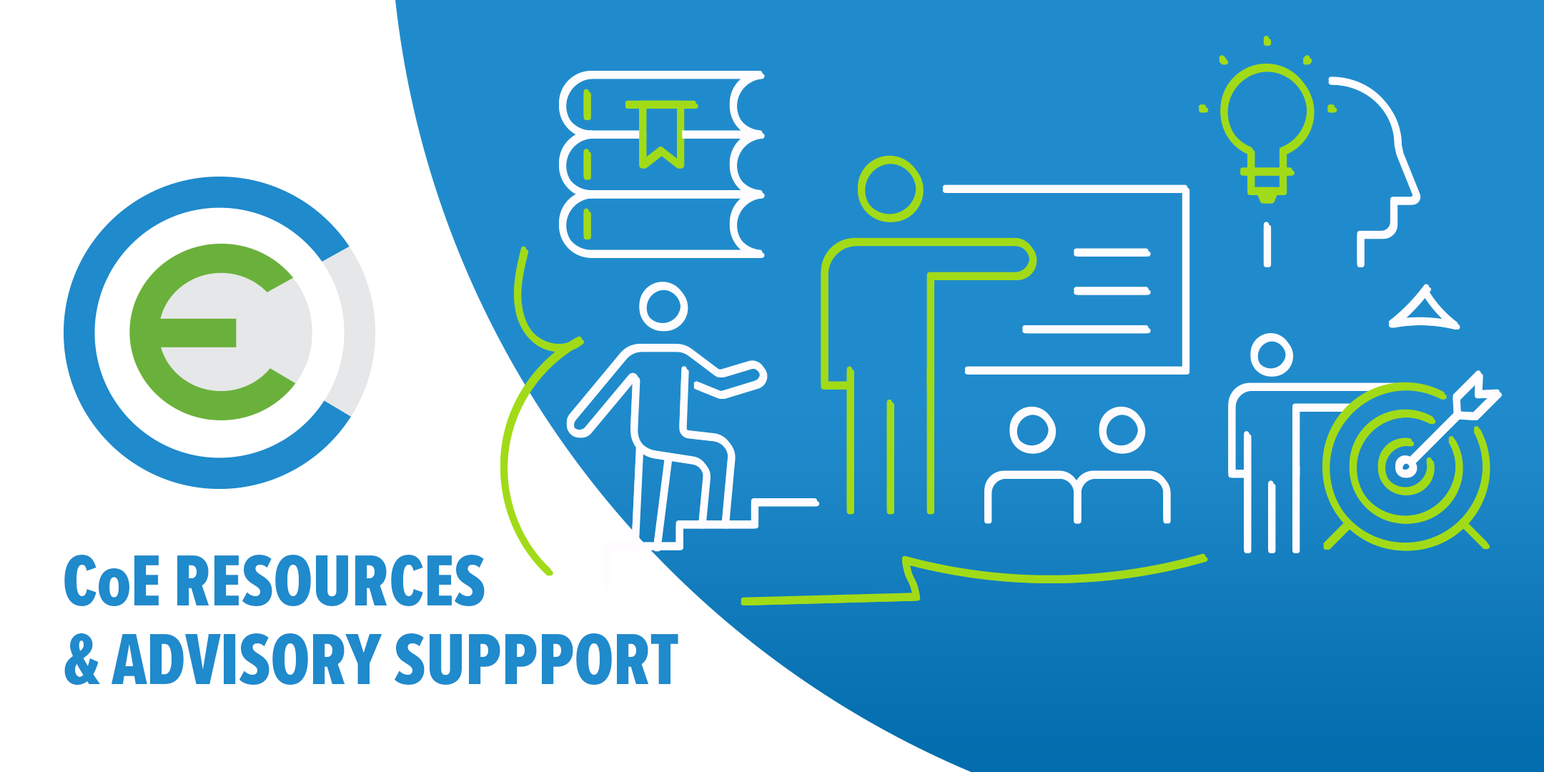
<style>
.page{position:relative;width:1544px;height:772px;background:#208bcc}
.page>*{position:absolute;margin:0}
.t1{font:75.1px/78.6px "ProximaNovaExCn-Extrabld";color:#1f8acc;text-transform:uppercase;scale:1.03 1}
.t2{font:75.1px/78.6px "ProximaNovaExCn-Extrabld";color:#1f8acc;scale:1.03 1}
</style>
<div class="page">
<p class="t1" style="left:64px;top:555px;width:614px;height:131px">C<span class="t2">o</span>E RESOURCES <br>&amp; ADVISORY SUPPPORT</p>
</div>
